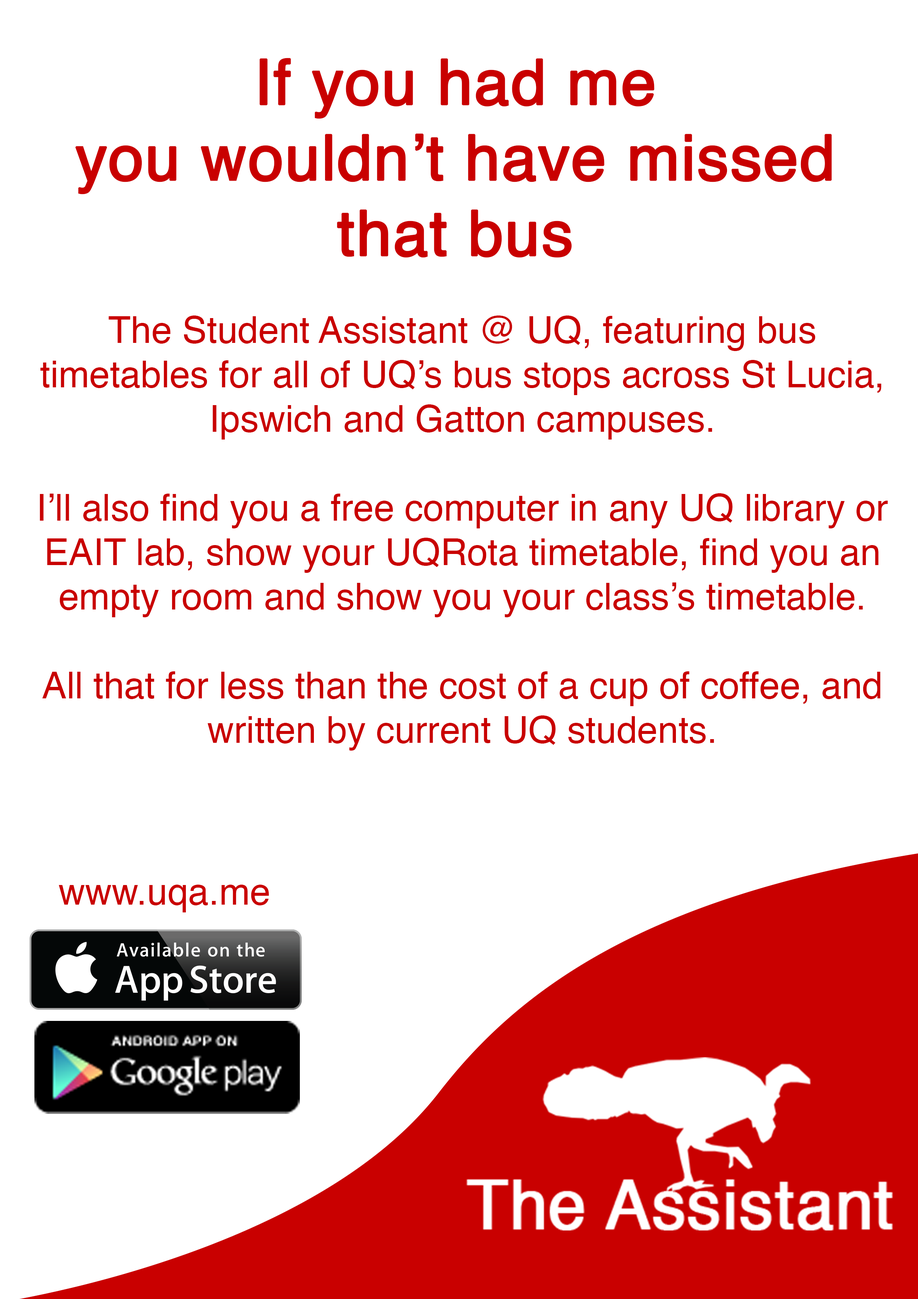
<style>
.page{position:relative;width:918px;height:1299px;background:#ffffff}
.page>*{position:absolute;margin:0}
.t1{font:62.9px "Helvetica";color:#c90000;font-weight:bold}
.t2{font:37px "Helvetica";color:#c90000}
</style>
<div class="page">
<p class="t1" style="left:75px;top:58px;width:757px;height:200px;text-align:center">If you had me<br>you wouldn’t have missed that bus</p>
<p class="t2" style="left:40px;top:315px;width:848px;height:435px;text-align:center">The Student Assistant @ UQ, featuring bus timetables for all of UQ’s bus stops across St Lucia, Ipswich and Gatton campuses.<br><br>I’ll also find you a free computer in any UQ library or EAIT lab, show your UQRota timetable, find you an empty room and show you your class’s timetable.<br><br>All that for less than the cost of a cup of coffee, and written by current UQ students.</p>
<p class="t2" style="left:59px;top:884px;width:210px;height:28px">www.uqa.me</p>
</div>
